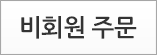
<style>
.page{position:relative;width:157px;height:55px;background:#fbfbfb}
.page>*{position:absolute;margin:0}
.t1{font:24px "NanumGothicBold";letter-spacing:-0.025em;color:#333333}
</style>
<div class="page">
<p class="t1" style="left:21px;top:16px;width:116px;height:23px">비회원 주문</p>
</div>
